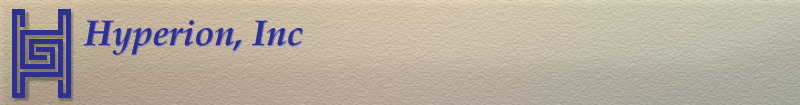
<style>
.page{position:relative;width:800px;height:105px}
.page>*{position:absolute;margin:0}
.t1{font:36px "BookAntiqua-BoldItalic";color:#2e3192}
</style>
<div class="page">
<p class="t1" style="left:83px;top:20px;width:220px;height:35px">Hyperion, Inc</p>
</div>
